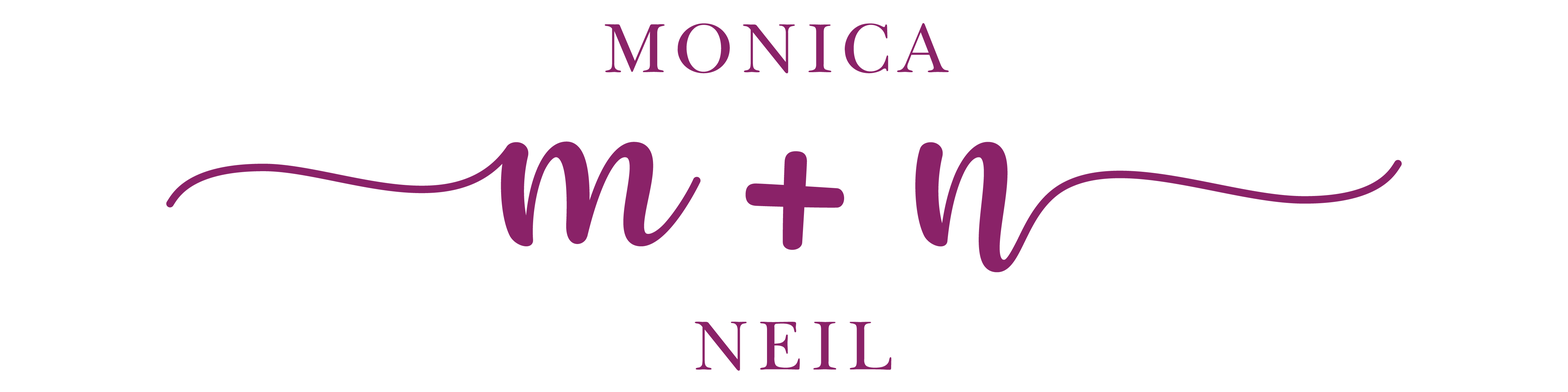
<style>
.page{position:relative;width:1568px;height:392px;background:#ffffff}
.page>*{position:absolute;margin:0}
.t1{font:82.6px "BaskervilleLight";letter-spacing:0.06em;color:#8a2268}
.t2{font:309.8px "HelloRegular";letter-spacing:0.06em;color:#8a2268}
</style>
<div class="page">
<p class="t1" style="left:605px;top:23px;width:344px;height:348px;text-align:center">MONICA <br><br><br>NEIL</p>
<p class="t2" style="left:166px;top:141px;width:1236px;height:131px">m  n</p>
<p class="t2" style="left:745px;top:151px;width:99px;height:99px">+</p>
</div>
